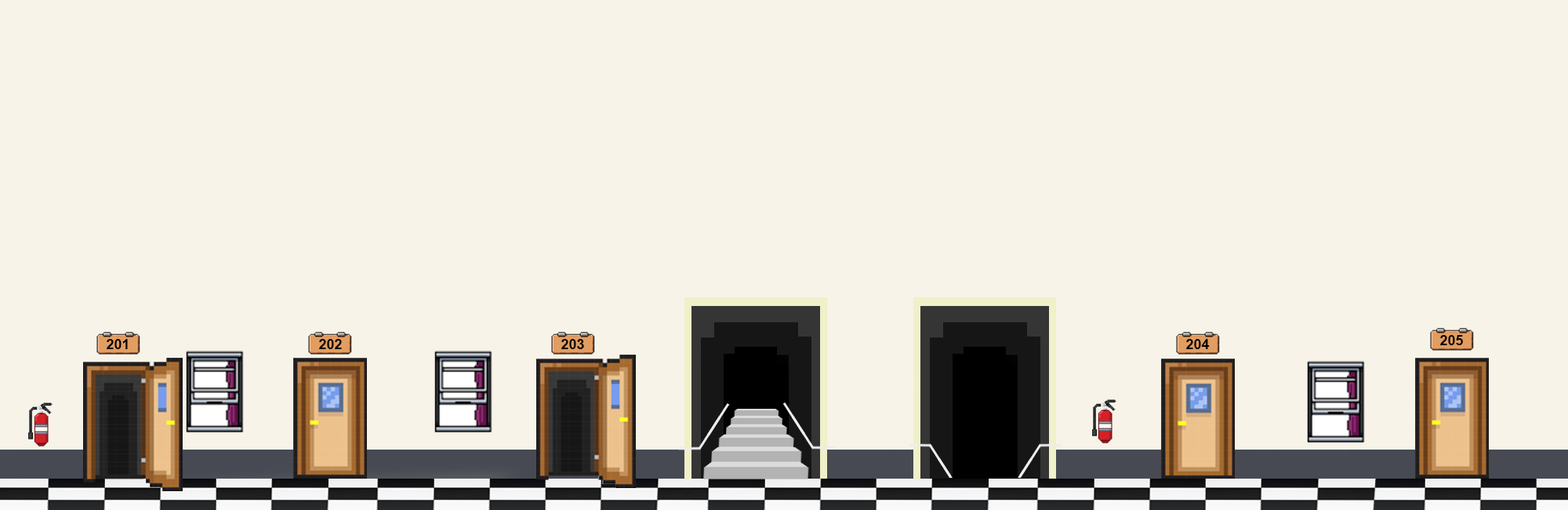
<style>
.page{position:relative;width:1568px;height:510px;background:#f8f3e8}
.page>*{position:absolute;margin:0}
.t1{font:14.1px "Arial-BoldMT";color:#000000}
</style>
<div class="page">
<p class="t1" style="left:107px;top:339px;width:21px;height:10px">201</p>
<p class="t1" style="left:319px;top:339px;width:23px;height:10px">202</p>
<p class="t1" style="left:561px;top:339px;width:23px;height:10px">203</p>
<p class="t1" style="left:1186px;top:339px;width:24px;height:10px">204</p>
<p class="t1" style="left:1440px;top:335px;width:23px;height:10px">205</p>
</div>
